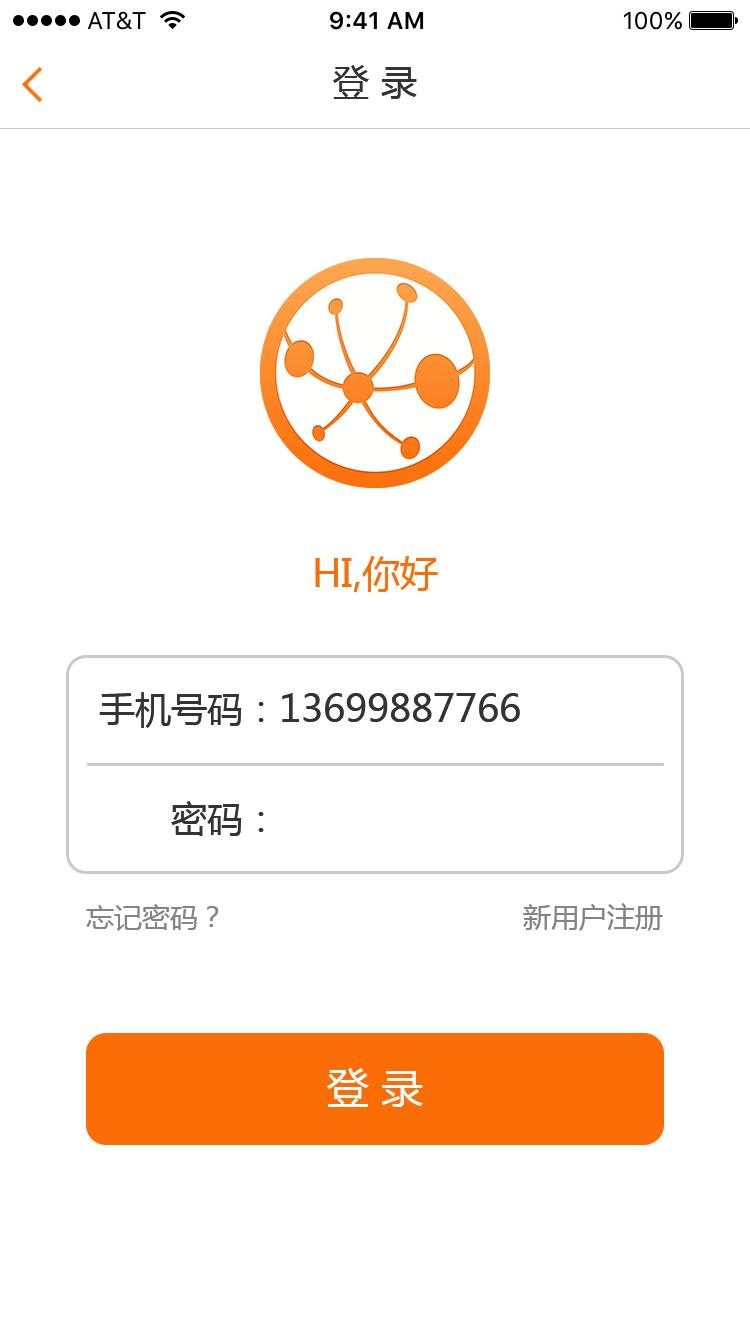
<style>
.page{position:relative;width:750px;height:1334px;background:#ffffff}
.page>*{position:absolute;margin:0}
.t1{font:36px "MicrosoftYaHei";color:#333333}
.t2{font:38px "MicrosoftYaHei";color:#fb6d07}
.t3{font:38px "MicrosoftYaHei";color:#333333}
.t4{font:28px "MicrosoftYaHei";color:#858484}
.t5{font:42px "MicrosoftYaHei";color:#ffffff}
</style>
<div class="page">
<p class="t1" style="left:333px;top:65px;width:84px;height:34px">登 录</p>
<p class="t2" style="left:315px;top:556px;width:123px;height:36px">HI,你好</p>
<p class="t3" style="left:99px;top:692px;width:421px;height:36px"><span class="t1">手机号码：</span>13699887766</p>
<p class="t1" style="left:171px;top:801px;width:93px;height:35px">密码：</p>
<p class="t4" style="left:86px;top:904px;width:133px;height:27px">忘记密码？</p>
<p class="t4" style="left:523px;top:903px;width:140px;height:28px">新用户注册</p>
<p class="t5" style="left:327px;top:1068px;width:96px;height:39px">登 录</p>
</div>
